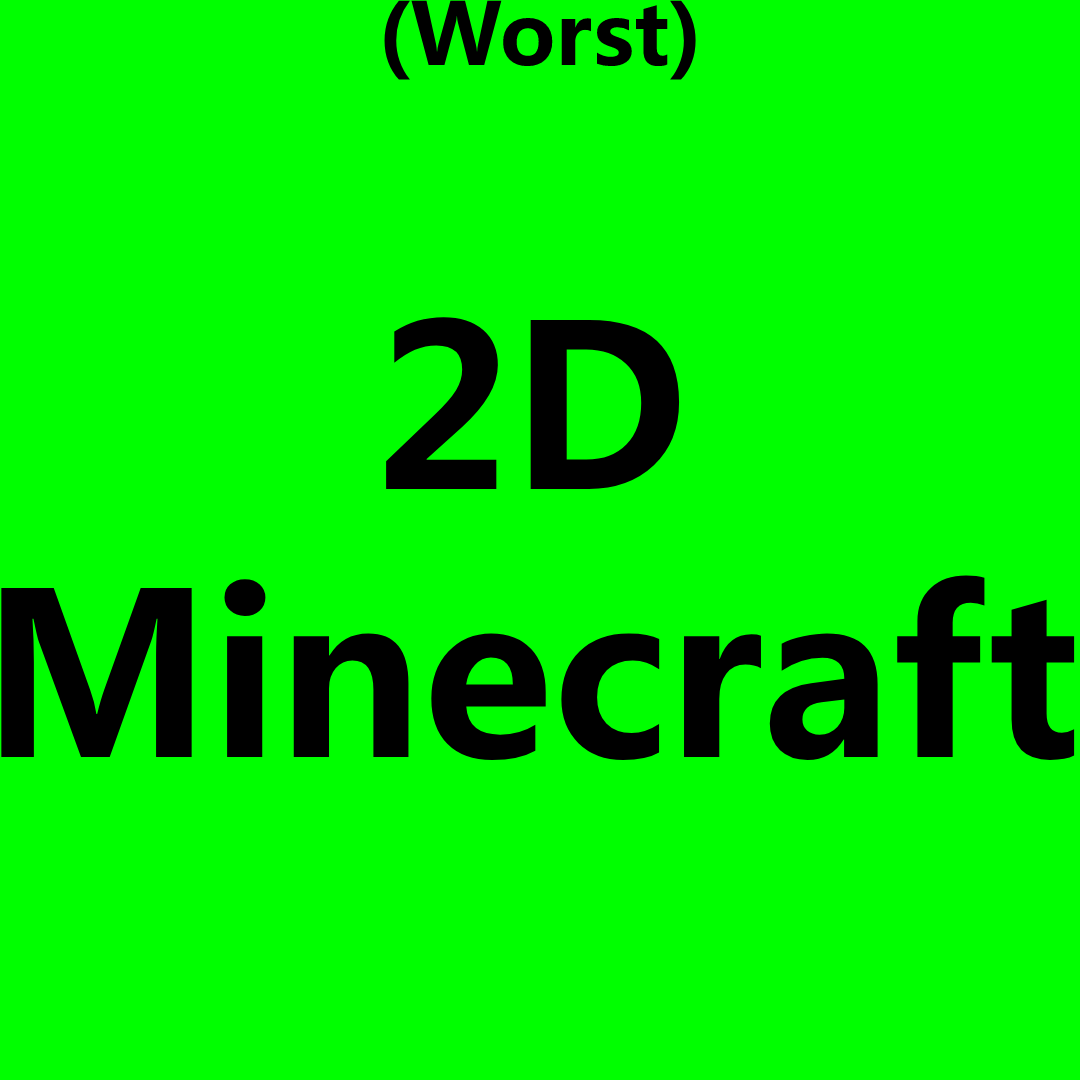
<style>
.page{position:relative;width:1080px;height:1080px;background:#00ff00}
.page>*{position:absolute;margin:0}
.t1{font:85px "MicrosoftYaHei";color:#000000}
.t2{font:223.4px "MicrosoftYaHei";color:#000000}
</style>
<div class="page">
<p class="t1" style="left:384px;top:0px;width:312px;height:80px">(Worst)</p>
<p class="t2" style="left:1px;top:317px;width:1074px;height:443px;text-align:center">2D<br>Minecraft</p>
</div>
